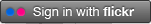
<style>
.page{position:relative;width:151px;height:24px}
.page>*{position:absolute;margin:0}
.t1{font:12.9px "HelveticaNeue";color:#ffffff}
.t2{font:12.9px "HelveticaNeue-Bold";color:#ffffff}
</style>
<div class="page">
<p class="t1" style="left:33px;top:6px;width:102px;height:13px">Sign in with <span class="t2">flickr</span></p>
</div>
